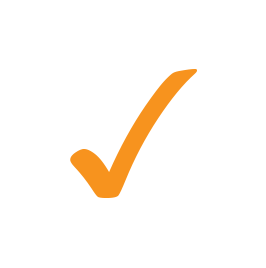
<style>
.page{position:relative;width:266px;height:268px;background:#ffffff}
.page>*{position:absolute;margin:0}
.t1{font:180px "ArialUnicodeMS";color:#f7931e}
</style>
<div class="page">
<p class="t1" style="left:70px;top:69px;width:127px;height:129px">✓</p>
</div>
